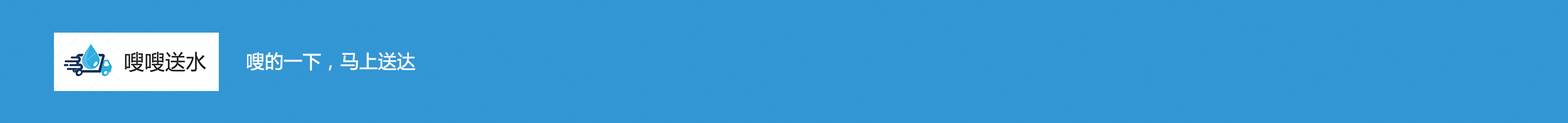
<style>
.page{position:relative;width:1568px;height:123px;background:#3296d4}
.page>*{position:absolute;margin:0}
.t1{font:18.4px "MicrosoftYaHei";color:#ffffff;font-weight:bold}
</style>
<div class="page">
<p class="t1" style="left:247px;top:52px;width:169px;height:18px">嗖的一下，马上送达</p>
</div>
